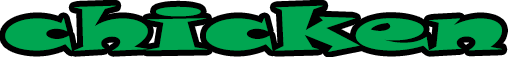
<style>
.page{position:relative;width:508px;height:57px;background:#00a651}
.page>*{position:absolute;margin:0}
.t1{font:60px "SnapITC-Regular";color:#00a651;scale:2 1}
</style>
<div class="page">
<p class="t1" style="left:5px;top:5px;width:497px;height:47px">chicken</p>
</div>
